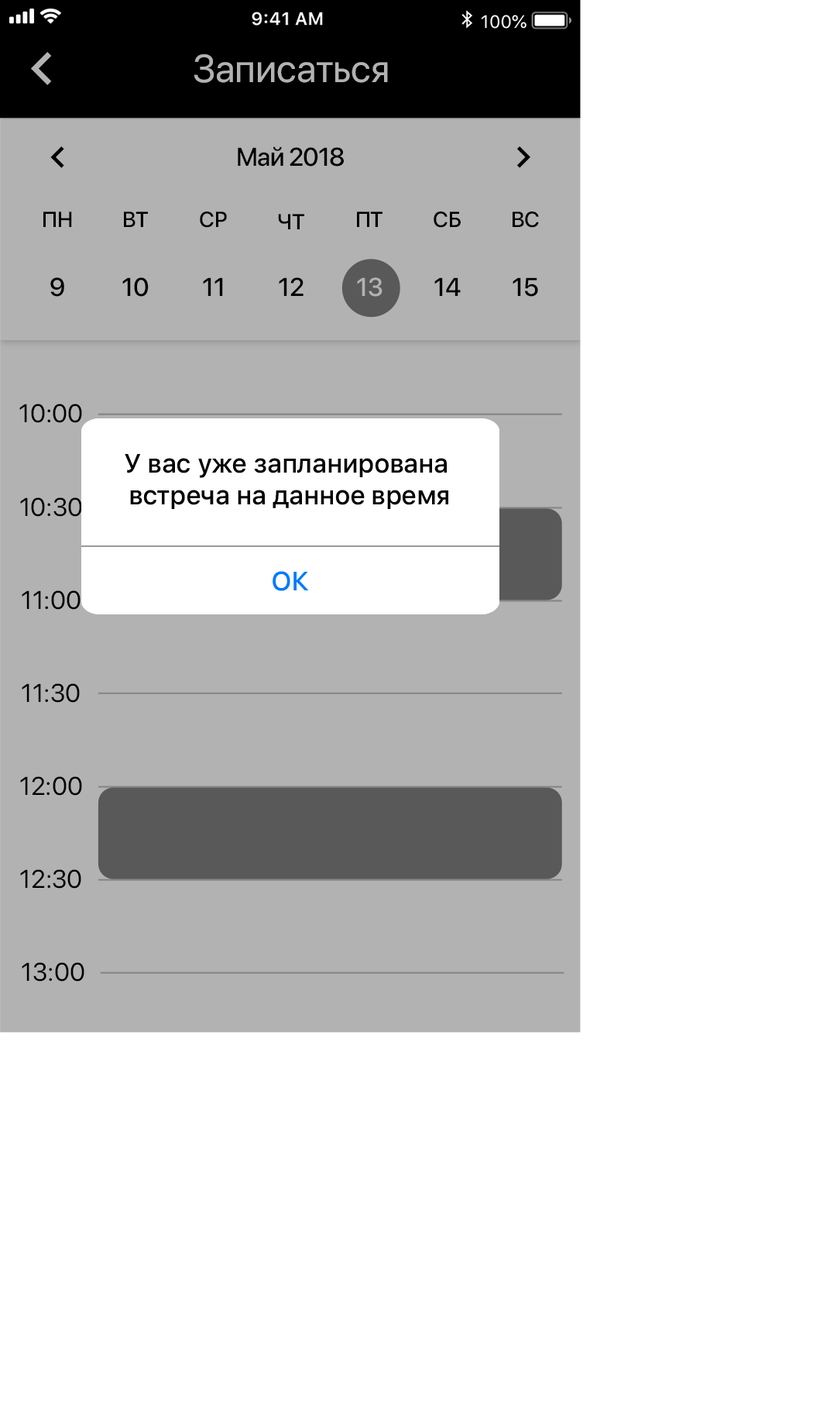
<style>
.page{position:relative;width:837px;height:1424px;background:#ffffff}
.page>*{position:absolute;margin:0}
.t1{font:38.7px "SFProDisplay-Regular";color:#b2b2b2}
.t2{font:25.6px "SFProDisplay-Medium";letter-spacing:-0.023em;color:#000000}
.t3{font:21.7px "SFProDisplay-Medium";color:#000000}
.t4{font:25.6px "SFProDisplay-Medium";color:#000000}
.t5{font:25.6px "SFProDisplay-Medium";color:#b2b2b2}
.t6{font:25.6px "SFProDisplay-Regular";color:#000000}
.t7{font:26.3px "SFProText-Medium";letter-spacing:-0.024em;color:#030303}
.t8{font:26.3px "SFProText-Medium";letter-spacing:-0.024em;color:#007aff}
</style>
<div class="page">
<p class="t1" style="left:194px;top:54px;width:194px;height:29px">Записаться</p>
<p class="t2" style="left:238px;top:146px;width:106px;height:21px">Май 2018</p>
<p class="t3" style="left:43px;top:211px;width:29px;height:16px">ПН</p>
<p class="t3" style="left:124px;top:211px;width:24px;height:16px">ВТ</p>
<p class="t3" style="left:200px;top:211px;width:27px;height:17px">СР</p>
<p class="t3" style="left:278px;top:214px;width:26px;height:15px">ЧТ</p>
<p class="t3" style="left:357px;top:211px;width:26px;height:16px">ПТ</p>
<p class="t3" style="left:434px;top:211px;width:27px;height:17px">СБ</p>
<p class="t3" style="left:513px;top:211px;width:26px;height:17px">ВС</p>
<p class="t4" style="left:50px;top:277px;width:14px;height:20px">9</p>
<p class="t4" style="left:122px;top:277px;width:27px;height:20px">10</p>
<p class="t4" style="left:203px;top:277px;width:20px;height:19px">11</p>
<p class="t4" style="left:279px;top:277px;width:25px;height:19px">12</p>
<p class="t5" style="left:357px;top:277px;width:26px;height:20px">13</p>
<p class="t4" style="left:435px;top:277px;width:26px;height:19px">14</p>
<p class="t4" style="left:513px;top:277px;width:25px;height:20px">15</p>
<p class="t6" style="left:19px;top:404px;width:63px;height:19px">10:00</p>
<p class="t7" style="left:125px;top:454px;width:324px;height:55px;text-align:center">У вас уже запланирована <br>встреча на данное время</p>
<p class="t6" style="left:20px;top:497px;width:62px;height:20px">10:30</p>
<p class="t8" style="left:273px;top:571px;width:36px;height:20px">ОК</p>
<p class="t6" style="left:22px;top:590px;width:59px;height:20px">11:00</p>
<p class="t6" style="left:22px;top:683px;width:58px;height:20px">11:30</p>
<p class="t6" style="left:20px;top:776px;width:62px;height:20px">12:00</p>
<p class="t6" style="left:20px;top:869px;width:61px;height:20px">12:30</p>
<p class="t6" style="left:22px;top:962px;width:62px;height:20px">13:00</p>
</div>
